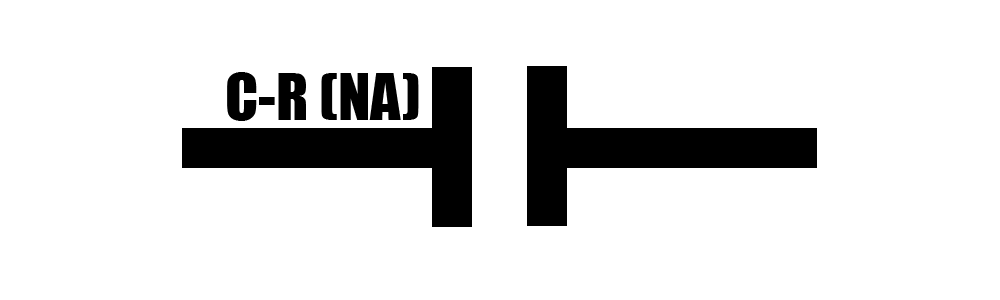
<style>
.page{position:relative;width:1000px;height:300px;background:#ffffff}
.page>*{position:absolute;margin:0}
.t1{font:60px "Impact";color:#000000}
</style>
<div class="page">
<p class="t1" style="left:227px;top:72px;width:192px;height:49px">C-R (NA)</p>
</div>
